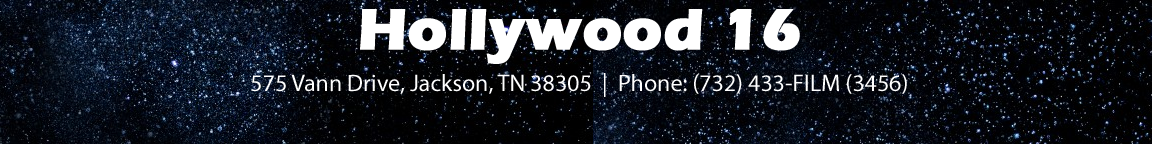
<style>
.page{position:relative;width:1152px;height:144px}
.page>*{position:absolute;margin:0}
.t1{font:24px "MyriadPro-Regular";color:#ffffff}
.t2{font:60px "ErasITC-Bold";color:#ffffff;font-weight:bold}
</style>
<div class="page">
<p class="t1" style="left:251px;top:9px;width:656px;height:88px;text-align:center"><span class="t2">Hollywood 16<br><br></span>575 Vann Drive, Jackson, TN 38305  |  Phone: (732) 433-FILM (3456)</p>
</div>
